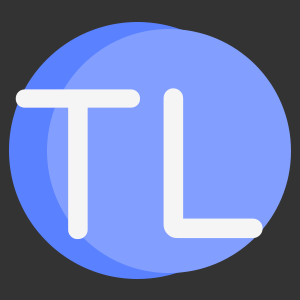
<style>
.page{position:relative;width:300px;height:300px;background:#829fff}
.page>*{position:absolute;margin:0}
.t1{font:212.8px "VarelaRound-Regular";color:#f5f5f5}
</style>
<div class="page">
<p class="t1" style="left:15px;top:88px;width:248px;height:152px">TL</p>
</div>
